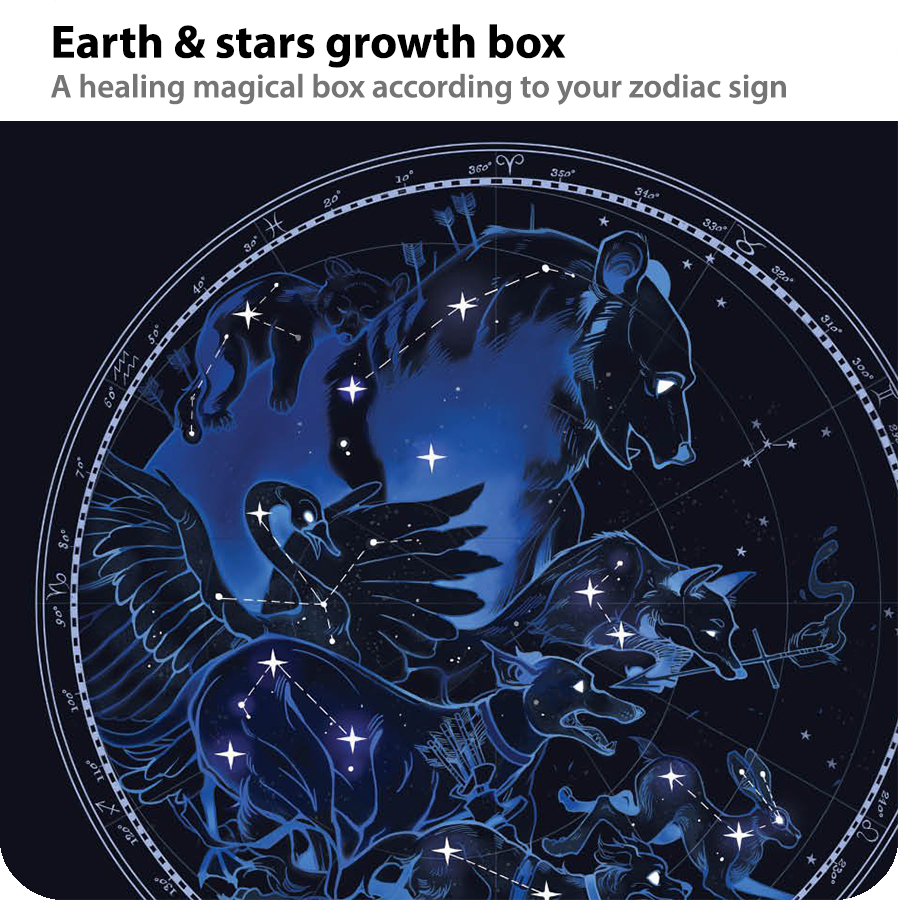
<style>
.page{position:relative;width:898px;height:900px;background:#10101c}
.page>*{position:absolute;margin:0}
.t1{font:33px "MyriadPro-Semibold";color:#757575}
.t2{font:47px "MyriadPro-Bold";color:#000000}
</style>
<div class="page">
<p class="t1" style="left:51px;top:24px;width:735px;height:81px"><span class="t2">Earth &amp; stars growth box<br></span>A healing magical box according to your zodiac sign</p>
</div>
